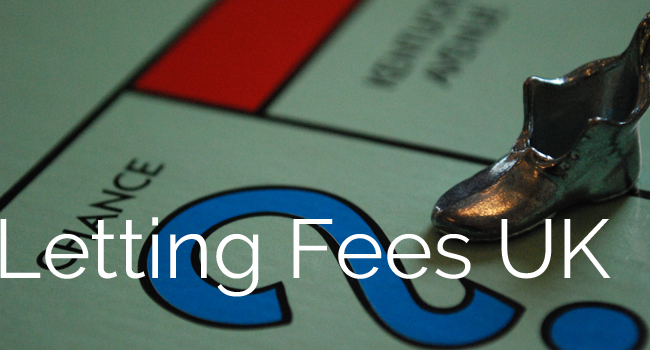
<style>
.page{position:relative;width:650px;height:350px}
.page>*{position:absolute;margin:0}
.t1{font:83.3px "Raleway-Regular";color:#fefefe}
</style>
<div class="page">
<p class="t1" style="left:0px;top:217px;width:611px;height:80px">Letting Fees UK</p>
</div>
